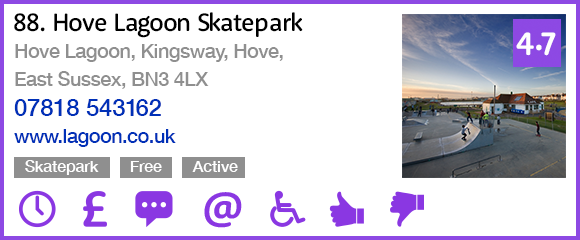
<style>
.page{position:relative;width:580px;height:240px;background:#ffffff}
.page>*{position:absolute;margin:0}
.t1{font:26px "RooneySans-Medium";letter-spacing:-0.02em;color:#000000}
.t2{font:33.3px "RooneySans-Bold";letter-spacing:-0.02em;color:#fffefe}
.t3{font:20px/28px "HelveticaNeue-Medium";letter-spacing:-0.02em;color:#8f8f8f}
.t4{font:24px "HelveticaNeue-Medium";color:#0030b7}
.t5{font:20px "HelveticaNeue-Medium";letter-spacing:-0.02em;color:#0030b7}
.t6{font:16px "HelveticaNeue-Medium";color:#ffffff}
</style>
<div class="page">
<p class="t1" style="left:14px;top:12px;width:289px;height:26px">88. Hove Lagoon Skatepark</p>
<p class="t2" style="left:516px;top:32px;width:40px;height:24px">4.7</p>
<p class="t3" style="left:15px;top:44px;width:268px;height:45px;text-align:justify">Hove Lagoon, Kingsway, Hove,<br>East Sussex, BN3 4LX</p>
<p class="t4" style="left:14px;top:99px;width:147px;height:17px">07818 543162</p>
<p class="t5" style="left:14px;top:129px;width:162px;height:18px">www.lagoon.co.uk</p>
<p class="t6" style="left:25px;top:160px;width:74px;height:15px">Skatepark</p>
<p class="t6" style="left:130px;top:161px;width:32px;height:11px">Free</p>
<p class="t6" style="left:192px;top:161px;width:46px;height:11px">Active</p>
</div>
